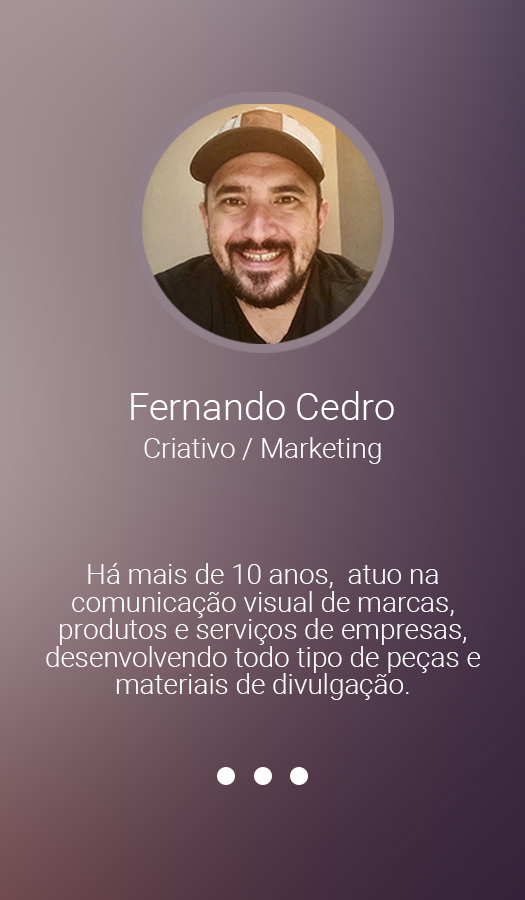
<style>
.page{position:relative;width:525px;height:900px}
.page>*{position:absolute;margin:0}
.t1{font:38.2px "Roboto-Light";color:#ffffff}
.t2{font:27.9px "Roboto-Light";color:#ffffff}
.t3{font:27.9px/27.5px "Roboto-Light";color:#ffffff}
</style>
<div class="page">
<p class="t1" style="left:131px;top:391px;width:263px;height:29px">Fernando Cedro</p>
<p class="t2" style="left:144px;top:437px;width:237px;height:27px">Criativo / Marketing</p>
<p class="t3" style="left:46px;top:563px;width:434px;height:137px;text-align:center">Há mais de 10 anos,  atuo na<br>comunicação visual de marcas,<br>produtos e serviços de empresas,<br>desenvolvendo todo tipo de peças e<br>materiais de divulgação.</p>
</div>
